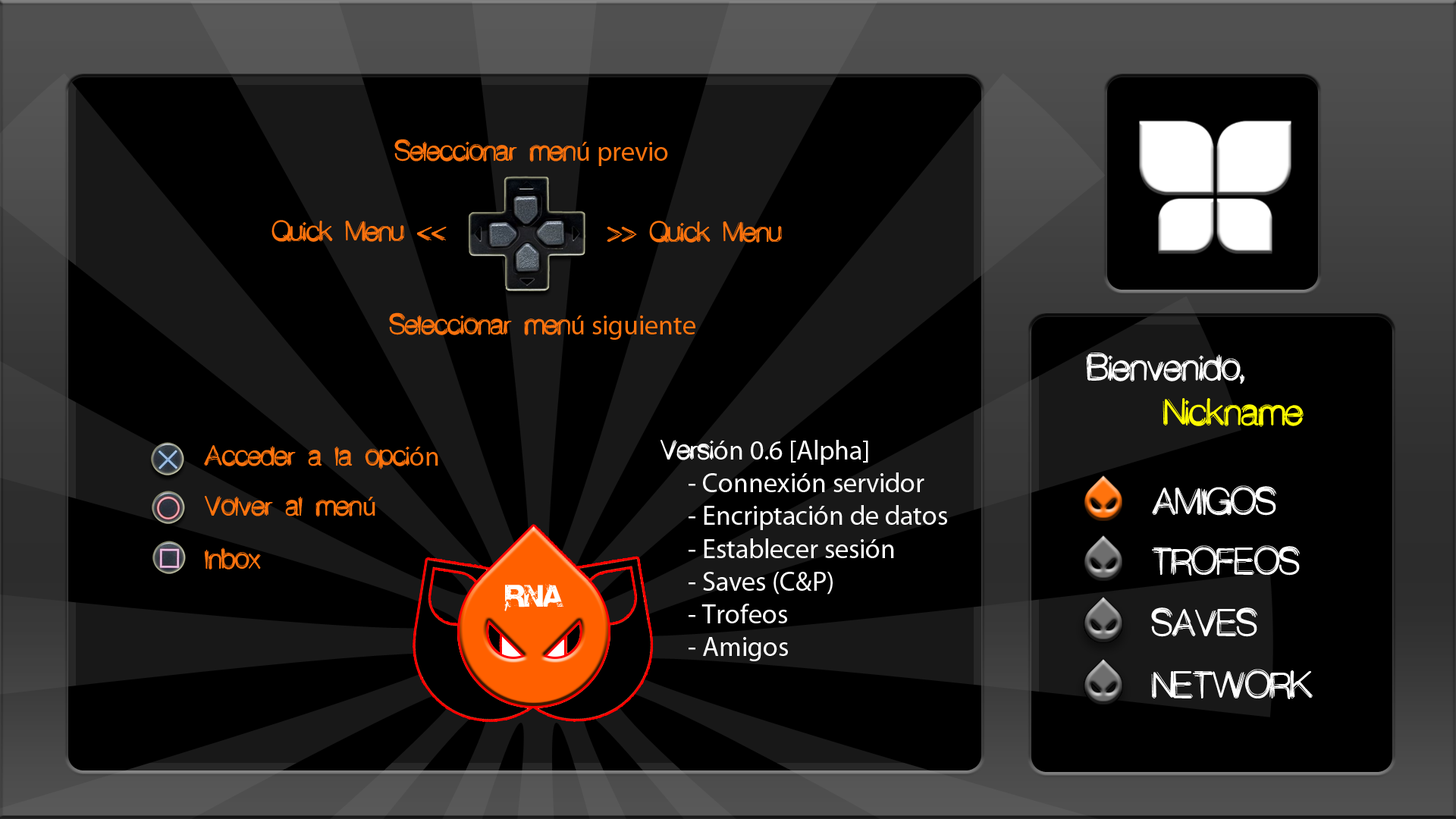
<style>
.page{position:relative;width:1456px;height:819px;background:#000000}
.page>*{position:absolute;margin:0}
.t1{font:27.3px "Decibel";color:#ff730d}
.t2{font:27.3px "MyriadPro-Regular";color:#ff730d}
.t3{font:36.4px "Decibel";color:#ffffff}
.t4{font:36.4px "Decibel";color:#fffc00}
.t5{font:27.3px "MyriadPro-Regular";color:#ffffff}
.t6{font:27.3px "Decibel";color:#ffffff}
.t7{font:27.3px "Base02";color:#ffffff}
</style>
<div class="page">
<p class="t1" style="left:394px;top:139px;width:274px;height:27px">Seleccionar men<span class="t2">ú previo</span></p>
<p class="t1" style="left:271px;top:220px;width:176px;height:22px">Quick Menu &lt;&lt;</p>
<p class="t1" style="left:607px;top:221px;width:175px;height:22px">&gt;&gt; Quick Menu</p>
<p class="t1" style="left:389px;top:312px;width:306px;height:28px">Seleccionar men<span class="t2">ú siguiente</span></p>
<p class="t3" style="left:1086px;top:353px;width:159px;height:31px">Bienvenido,</p>
<p class="t4" style="left:1163px;top:398px;width:141px;height:29px">Nickname</p>
<p class="t1" style="left:204px;top:445px;width:234px;height:24px">Acceder a la opci<span class="t2">ón</span></p>
<p class="t5" style="left:660px;top:440px;width:287px;height:221px"><span class="t6">Versi</span>ón 0.6 [Alpha]<br> - Connexión servidor<br> - Encriptación de datos<br> - Establecer sesión<br> - Saves (C&amp;P)<br> - Trofeos<br> - Amigos</p>
<p class="t3" style="left:1152px;top:485px;width:124px;height:31px">AMIGOS</p>
<p class="t1" style="left:205px;top:496px;width:170px;height:21px">Volver al men<span class="t2">ú</span></p>
<p class="t3" style="left:1152px;top:545px;width:148px;height:31px">TROFEOS</p>
<p class="t1" style="left:205px;top:548px;width:56px;height:22px">Inbox</p>
<p class="t7" style="left:504px;top:583px;width:59px;height:28px">rna</p>
<p class="t3" style="left:1151px;top:607px;width:106px;height:30px">SAVES</p>
<p class="t3" style="left:1151px;top:669px;width:162px;height:30px">NETWORK</p>
</div>
